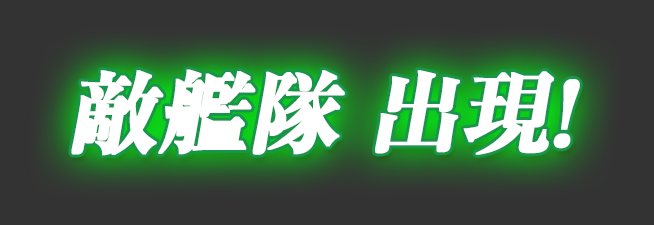
<style>
.page{position:relative;width:654px;height:225px;background:#333333}
.page>*{position:absolute;margin:0}
.t1{font:90px "RyuminPr6N-ExBold";letter-spacing:-0.025em;color:#ffffff;font-weight:bold;font-style:italic}
</style>
<div class="page">
<p class="t1" style="left:71px;top:69px;width:509px;height:87px">敵艦隊 出現!</p>
</div>
